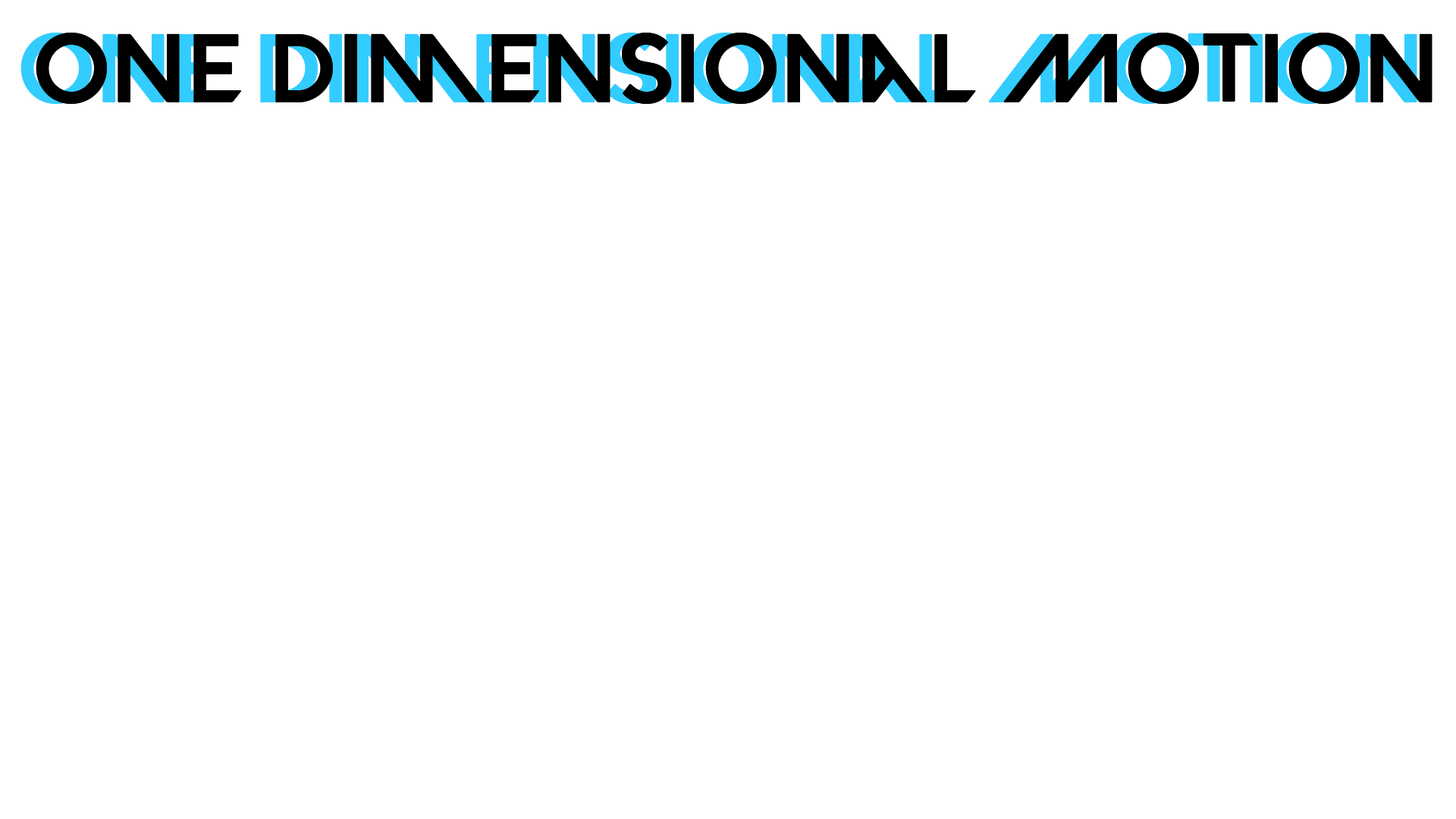
<style>
.page{position:relative;width:1456px;height:819px;background:#ffffff}
.page>*{position:absolute;margin:0}
.t1{font:97.8px "VALORANT-Regular";color:#33ccff}
.t2{font:97.8px "VALORANT-Regular";color:#000000}
</style>
<div class="page">
<p class="t1" style="left:20px;top:33px;width:1397px;height:71px">One Dimensional Motion</p>
<p class="t2" style="left:36px;top:33px;width:1396px;height:71px">One Dimensional Motion</p>
</div>
